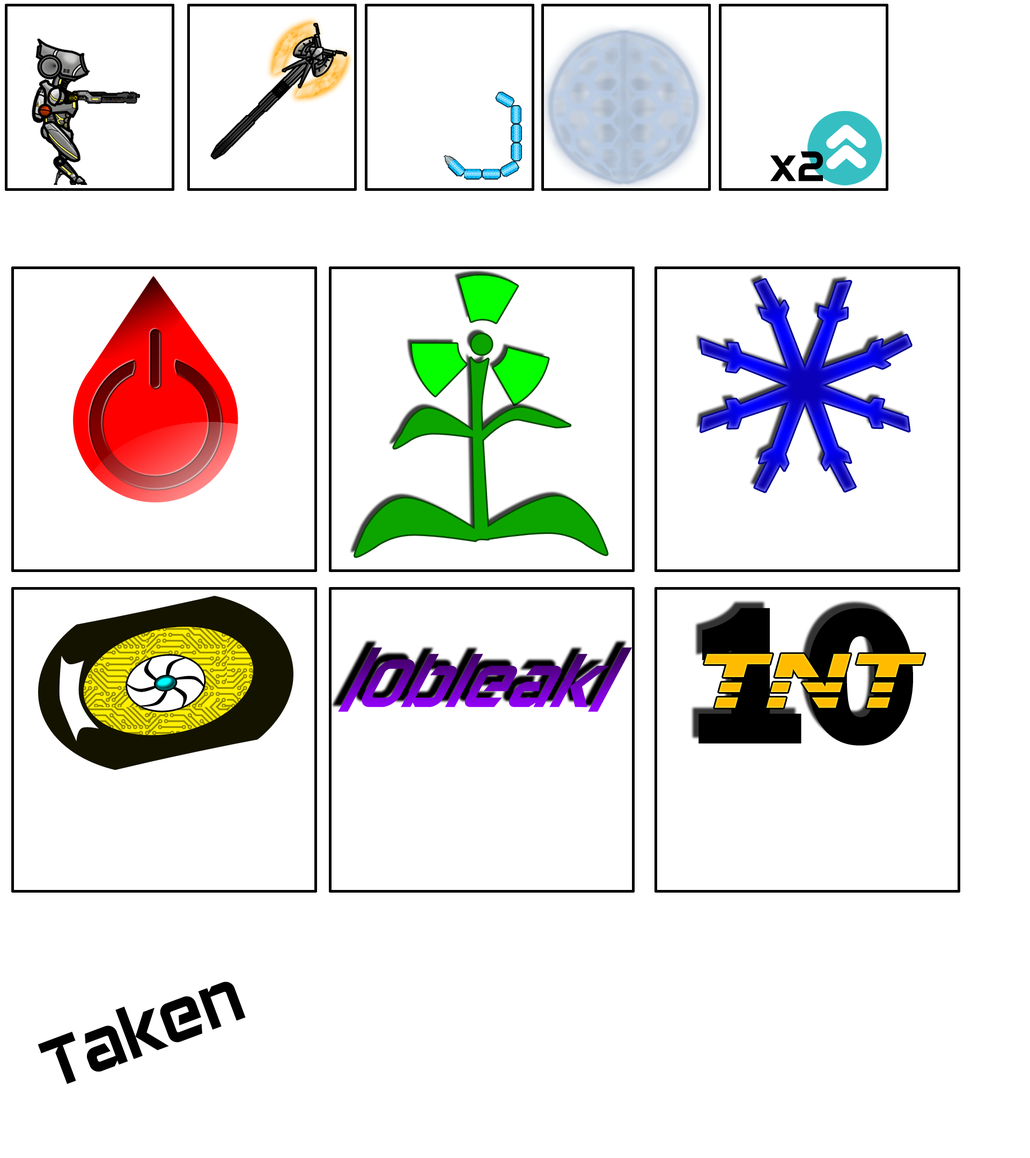
<style>
.page{position:relative;width:1030px;height:1158px;background:#ffffff}
.page>*{position:absolute;margin:0}
.t1{font:43.7px "DAGGERSQUARE";color:#000000}
.t2{font:199.9px "FranklinGothic-Heavy";color:#000000}
.t3{font:80.2px "DAGGERSQUARE";scale:0.88 1}
.t4{font:69.7px "DAGGERSQUARE";color:#000000}
</style>
<div class="page">
<p class="t1" style="left:770px;top:151px;width:53px;height:30px">x2</p>
<p class="t2" style="left:698px;top:608px;width:215px;height:138px">10</p>
<p class="t3" style="left:338px;top:647px;width:294px;height:65px">|Obleak|</p>
<p class="t4" style="left:38px;top:982px;width:208px;height:102px;rotate:-20deg">Taken</p>
</div>
